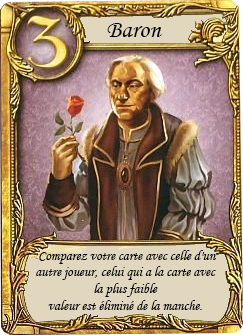
<style>
.page{position:relative;width:243px;height:335px}
.page>*{position:absolute;margin:0}
.t1{font:25px "MonotypeCorsiva";color:#000000}
.t2{font:14px "MonotypeCorsiva";color:#000000}
</style>
<div class="page">
<p class="t1" style="left:107px;top:23px;width:55px;height:14px">Baron</p>
<p class="t2" style="left:36px;top:250px;width:180px;height:60px;text-align:center">Comparez votre carte avec celle d'un <br>autre joueur, celui qui a la carte avec la plus faible <br>valeur est éliminé de la manche.</p>
</div>
